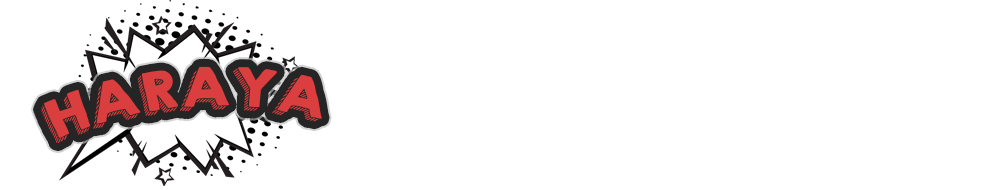
<style>
.page{position:relative;width:1003px;height:190px;background:#ffffff}
.page>*{position:absolute;margin:0}
.t1{font:47.6px "KGHAPPY";color:#da3e3e}
</style>
<div class="page">
<p class="t1" style="left:40px;top:66px;width:282px;height:78px">HARAYA</p>
</div>
